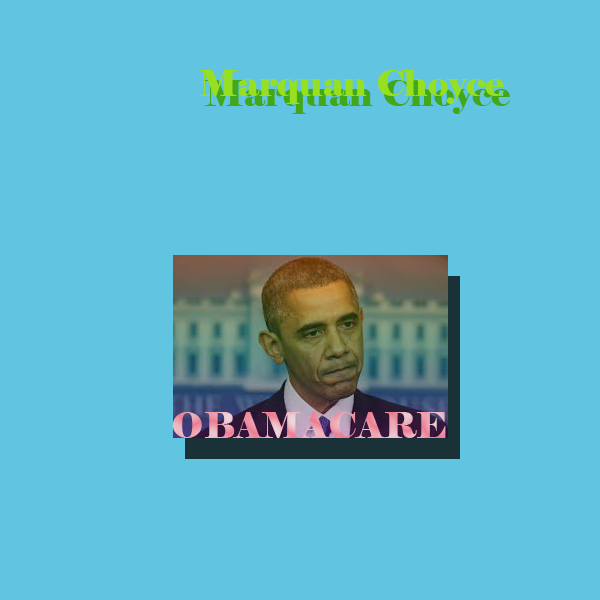
<style>
.page{position:relative;width:600px;height:600px;background:#61c4e1}
.page>*{position:absolute;margin:0}
.t1{font:36px "Elephant-Regular";color:#97e021}
.t2{font:36px "Elephant-Regular"}
</style>
<div class="page">
<p class="t1" style="left:199px;top:70px;width:305px;height:34px">Marquan Choyce</p>
<p class="t2" style="left:172px;top:412px;width:274px;height:26px">OBAMACARE</p>
</div>
